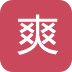
<style>
.page{position:relative;width:72px;height:72px;background:#c9485b}
.page>*{position:absolute;margin:0}
.t1{font:41.5px "MicrosoftYaHei";letter-spacing:0.06em;color:#ffffff}
</style>
<div class="page">
<p class="t1" style="left:17px;top:14px;width:41px;height:41px">爽</p>
</div>
